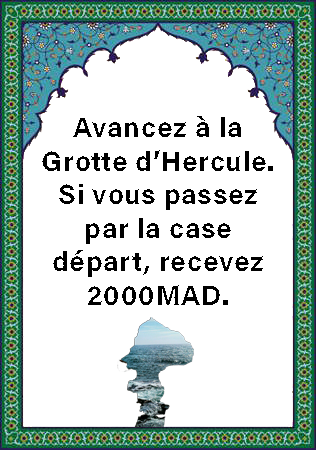
<style>
.page{position:relative;width:316px;height:450px;background:#ffffff}
.page>*{position:absolute;margin:0}
.t1{font:28px "AcuminConcept-Bold";letter-spacing:0.025em;color:#000000}
</style>
<div class="page">
<p class="t1" style="left:42px;top:116px;width:231px;height:189px;text-align:center">Avancez à la Grotte d’Hercule. Si vous passez par la case départ, recevez 2000MAD.</p>
</div>
